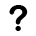
<style>
.page{position:relative;width:36px;height:36px;background:#ffffff}
.page>*{position:absolute;margin:0}
.t1{font:36px "ArialRoundedMTBold";color:#000000}
</style>
<div class="page">
<p class="t1" style="left:9px;top:5px;width:19px;height:26px">?</p>
</div>
